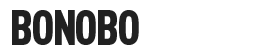
<style>
.page{position:relative;width:265px;height:54px;background:#ffffff}
.page>*{position:absolute;margin:0}
.t1{font:48px "DINOT-CondBlack";letter-spacing:-0.05em;color:#212121}
</style>
<div class="page">
<p class="t1" style="left:12px;top:10px;width:127px;height:35px">BONOBO</p>
</div>
